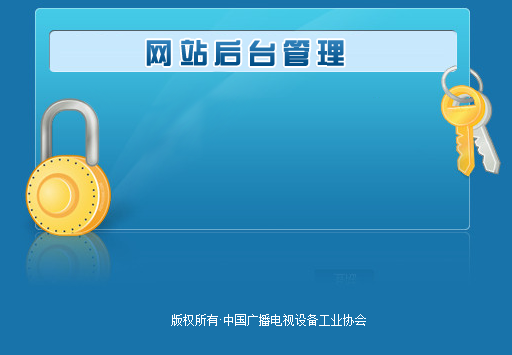
<style>
.page{position:relative;width:512px;height:355px;background:#1873aa}
.page>*{position:absolute;margin:0}
.t1{font:28px "ADZYJT--GB1-0";letter-spacing:0.2em;font-weight:bold}
.t2{font:12px "SimSun";color:#ffffff}
.t3{font:12px "ArialMT";color:#ffffff}
</style>
<div class="page">
<p class="t1" style="left:146px;top:39px;width:198px;height:27px">网站后台管理</p>
<p class="t2" style="left:171px;top:314px;width:195px;height:12px">版权所有<span class="t3">·</span>中国广播电视设备工业协会</p>
</div>
